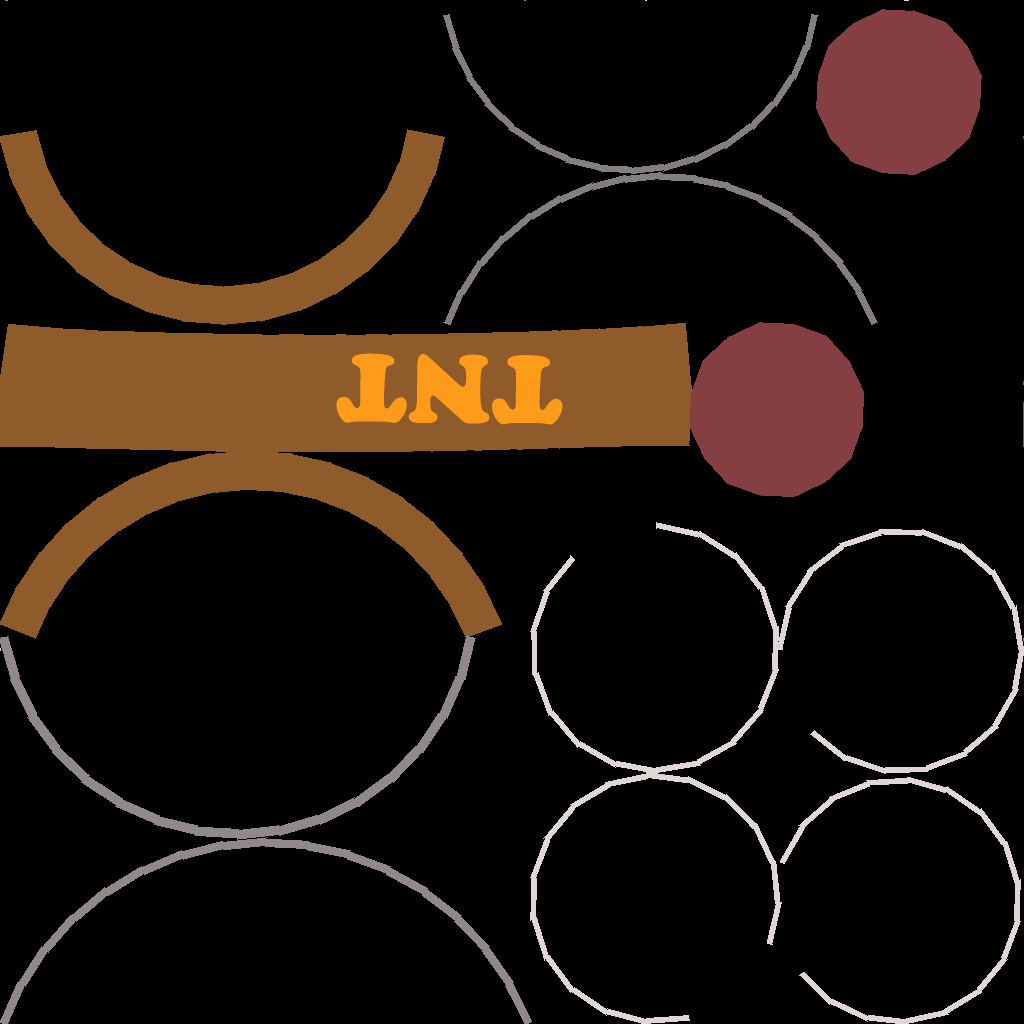
<style>
.page{position:relative;width:1024px;height:1024px;background:#000000}
.page>*{position:absolute;margin:0}
.t1{font:100px "CooperBlack";letter-spacing:0.01em;color:#ff9b1a}
</style>
<div class="page">
<p class="t1" style="left:336px;top:353px;width:227px;height:72px;rotate:-179deg">TNT</p>
</div>
